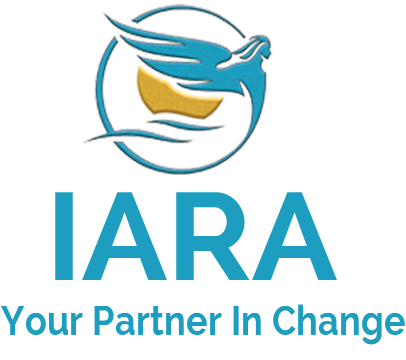
<style>
.page{position:relative;width:406px;height:360px;background:#ffffff}
.page>*{position:absolute;margin:0}
.t1{font:123.9px "Raleway-Bold";color:#1d9ec0}
.t2{font:41.8px "Raleway-Bold";color:#1d9ec0;scale:0.87 1}
</style>
<div class="page">
<p class="t1" style="left:55px;top:192px;width:282px;height:88px">IARA</p>
<p class="t2" style="left:0px;top:304px;width:405px;height:41px">Your Partner In Change</p>
</div>
